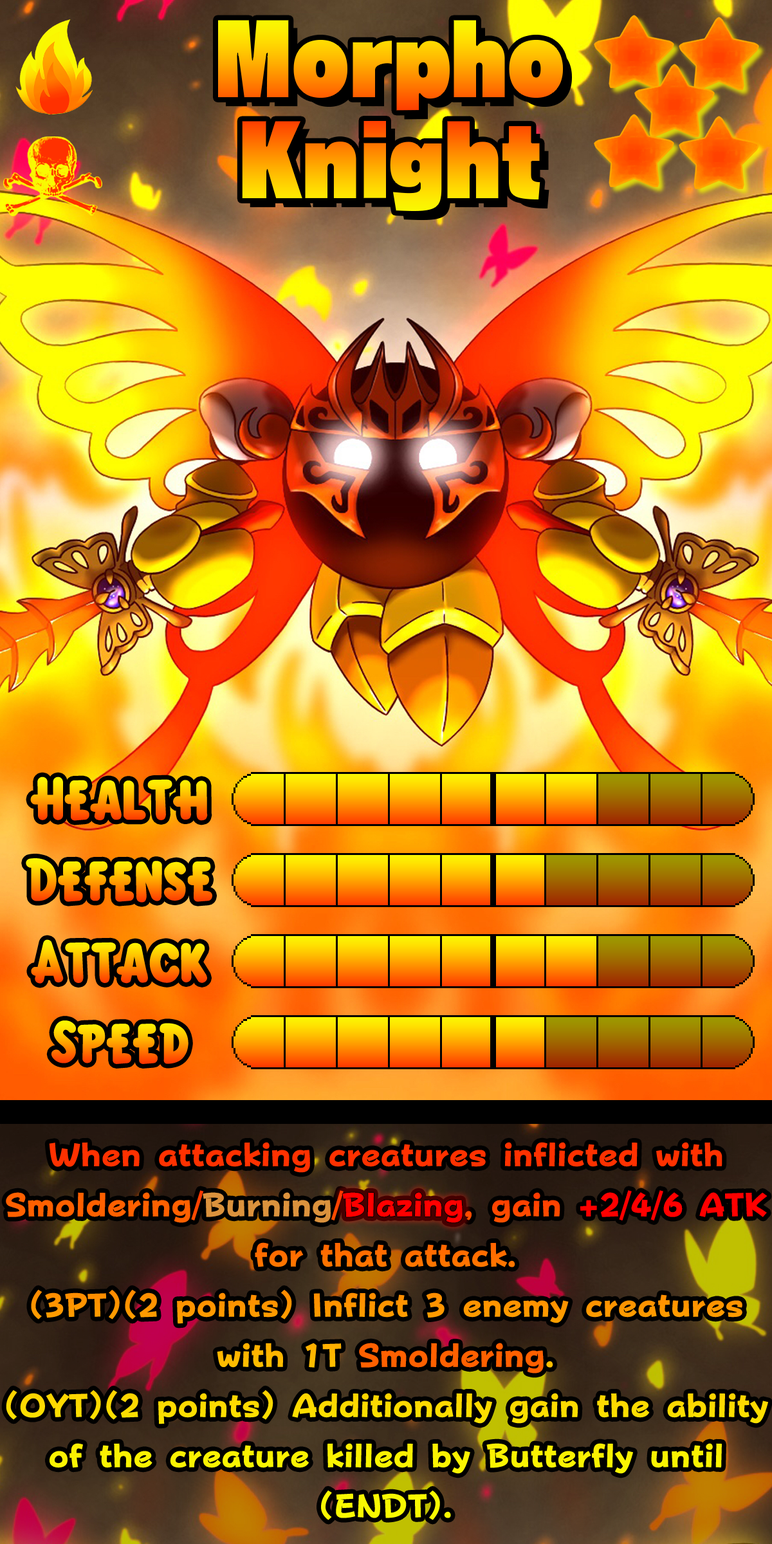
<style>
.page{position:relative;width:772px;height:1544px}
.page>*{position:absolute;margin:0}
.t1{font:160.9px/101.4px "RaglanPunchStd-UB";scale:0.83 1}
.t2{font:92.7px "KirbyClassic"}
.t3{font:56.5px/50.2px "FOTPopHappinessStrp-ExtraBold"}
.t4{font:56.5px "FOTPopHappinessStrp-ExtraBold";color:#ff6000}
.t5{font:56.5px "FOTPopHappinessStrp-ExtraBold";color:#db923d}
.t6{font:56.5px "FOTPopHappinessStrp-ExtraBold";color:#ff0000}
</style>
<div class="page">
<p class="t1" style="left:217px;top:19px;width:347px;height:193px;text-align:center">Morpho<br>Knight</p>
<p class="t2" style="left:30px;top:777px;width:178px;height:44px">Health</p>
<p class="t2" style="left:26px;top:858px;width:186px;height:45px">Defense</p>
<p class="t2" style="left:31px;top:939px;width:176px;height:45px">Attack</p>
<p class="t2" style="left:51px;top:1021px;width:138px;height:43px">Speed</p>
<p class="t3" style="left:6px;top:1142px;width:762px;height:378px;text-align:center">When attacking creatures inflicted with Smoldering/Burning/Blazing, gain +2/4/6 ATK for that attack.<br>(3PT)(2 points) Inflict 3 enemy creatures with 1T Smoldering.<br>(OYT)(2 points) Additionally gain the ability of the creature killed by Butterfly until (ENDT).</p>
<p class="t4" style="left:6px;top:1192px;width:184px;height:31px">Smoldering</p>
<p class="t5" style="left:203px;top:1192px;width:128px;height:31px">Burning</p>
<p class="t6" style="left:342px;top:1192px;width:121px;height:31px">Blazing</p>
<p class="t6" style="left:580px;top:1190px;width:188px;height:31px">+2/4/6 ATK</p>
<p class="t4" style="left:359px;top:1343px;width:185px;height:31px">Smoldering</p>
</div>
